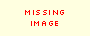
<style>
.page{position:relative;width:90px;height:36px;background:#ffffe0}
.page>*{position:absolute;margin:0}
.t1{font:9px "Silkscreen";color:#ff0000}
</style>
<div class="page">
<p class="t1" style="left:25px;top:10px;width:39px;height:16px;text-align:center">mISSING<br>IMAGE</p>
</div>
